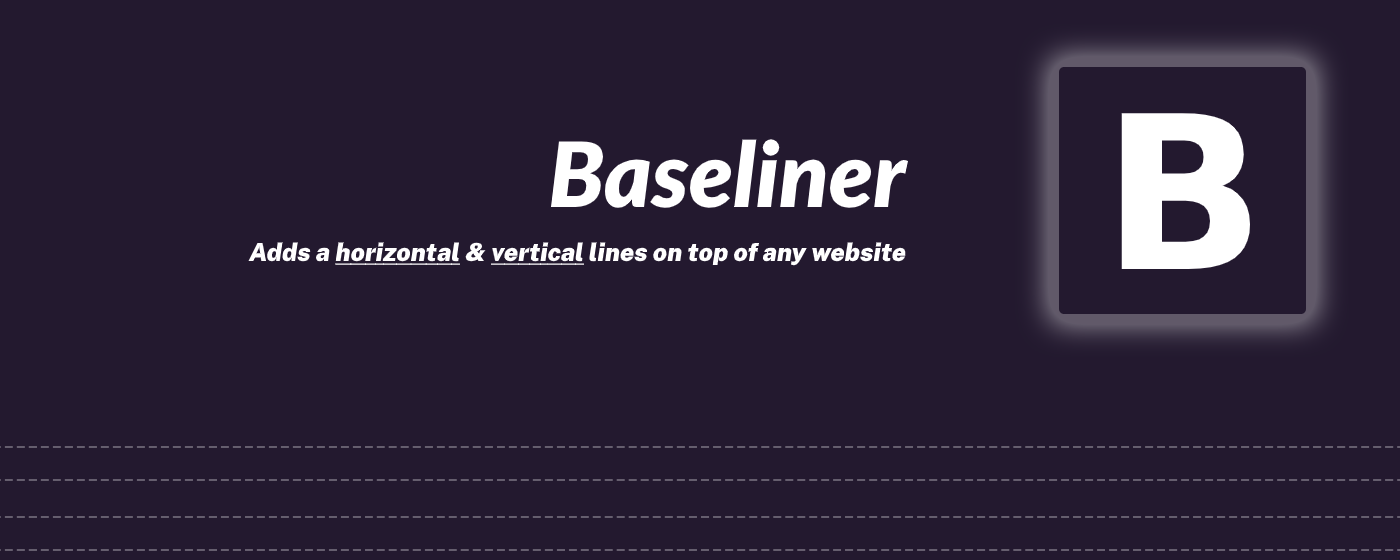
<style>
.page{position:relative;width:1400px;height:560px;background:#23192f}
.page>*{position:absolute;margin:0}
.t1{font:213.7px "DejaVuSans-Bold";color:#ffffff}
.t2{font:90px "Lato-BlackItalic";color:#ffffff}
.t3{font:25px "PublicSans-BlackItalic";color:#ffffff}
.t4{font:25px "PublicSans-BlackItalic";color:#ffffff;text-decoration:underline}
</style>
<div class="page">
<p class="t1" style="left:1121px;top:113px;width:129px;height:156px">B</p>
<p class="t2" style="left:550px;top:139px;width:358px;height:69px">Baseliner</p>
<p class="t3" style="left:248px;top:242px;width:658px;height:24px">Adds a <span class="t4">horizontal </span>&amp; <span class="t4">vertical</span> lines on top of any website</p>
</div>
